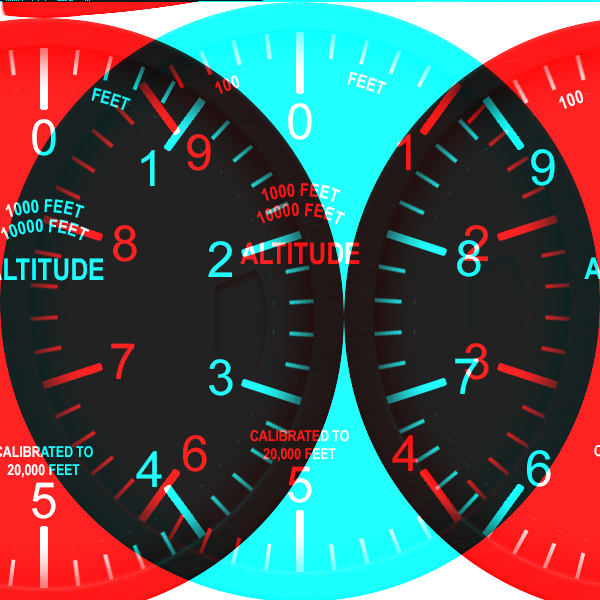
<style>
.page{position:relative;width:600px;height:600px}
.page>*{position:absolute;margin:0}
.t1{font:18px "ArialNarrow-Bold";text-transform:uppercase}
.t2{font:50px "ArialMT";color:#ffffff;text-transform:uppercase}
.t3{font:50px "ArialMT";text-transform:uppercase}
.t4{font:50px "ArialMT";color:#ff1818;text-transform:uppercase}
.t5{font:30px "ArialNarrow-Bold";text-transform:uppercase}
.t6{font:15px "ArialNarrow-Bold";text-transform:uppercase}
.t7{font:50px "ArialMT";color:#ff1919;text-transform:uppercase}
</style>
<div class="page">
<p class="t1" style="left:215px;top:69px;width:172px;height:23px">100                          FEET</p>
<p class="t2" style="left:288px;top:101px;width:24px;height:37px">0</p>
<p class="t3" style="left:187px;top:132px;width:24px;height:37px">9</p>
<p class="t4" style="left:397px;top:132px;width:14px;height:36px">1</p>
<p class="t1" style="left:261px;top:181px;width:80px;height:19px">1000 FEET</p>
<p class="t1" style="left:257px;top:200px;width:88px;height:23px">10000 FEET</p>
<p class="t3" style="left:113px;top:223px;width:24px;height:37px">8</p>
<p class="t3" style="left:464px;top:223px;width:24px;height:36px">2</p>
<p class="t5" style="left:240px;top:240px;width:120px;height:23px">Altitude</p>
<p class="t3" style="left:111px;top:341px;width:24px;height:36px">7</p>
<p class="t3" style="left:465px;top:341px;width:24px;height:37px">3</p>
<p class="t3" style="left:183px;top:433px;width:24px;height:37px">6</p>
<p class="t6" style="left:250px;top:428px;width:99px;height:32px;text-align:center">Calibrated to<br>20,000 Feet</p>
<p class="t7" style="left:392px;top:433px;width:26px;height:36px">4</p>
<p class="t3" style="left:288px;top:464px;width:24px;height:37px">5</p>
</div>
